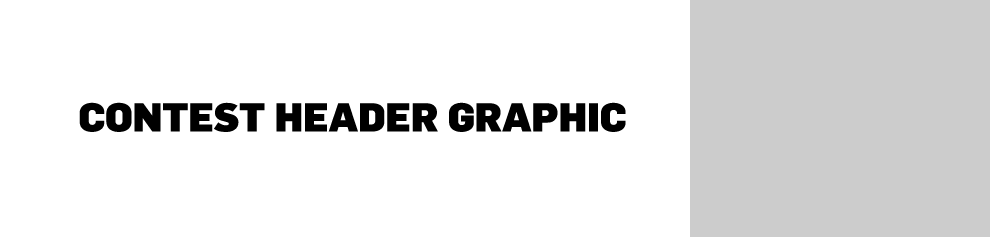
<style>
.page{position:relative;width:990px;height:237px;background:#ffffff}
.page>*{position:absolute;margin:0}
.t1{font:39.2px "FlamaBlack";color:#000000}
</style>
<div class="page">
<p class="t1" style="left:79px;top:102px;width:547px;height:30px">CONTEST HEADER GRAPHIC</p>
</div>
